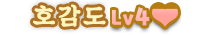
<style>
.page{position:relative;width:210px;height:35px;background:#ffffff}
.page>*{position:absolute;margin:0}
.t1{font:24px "SDKukdetopokki-aLt";letter-spacing:0.1em;color:#fcf5bd;font-weight:bold}
</style>
<div class="page">
<p class="t1" style="left:33px;top:4px;width:73px;height:23px">호감도</p>
</div>
